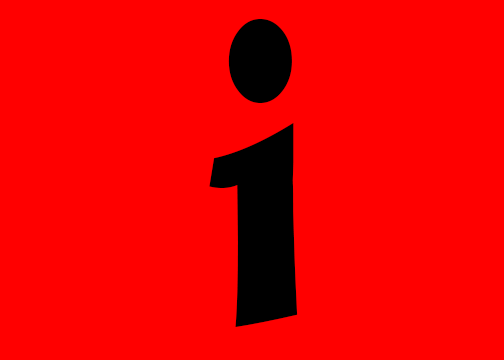
<style>
.page{position:relative;width:504px;height:360px;background:#ff0000}
.page>*{position:absolute;margin:0}
.t1{font:467.5px "MaturaMTScriptCapitals";color:#000000;scale:0.75 1}
</style>
<div class="page">
<p class="t1" style="left:209px;top:18px;width:89px;height:309px">i</p>
</div>
